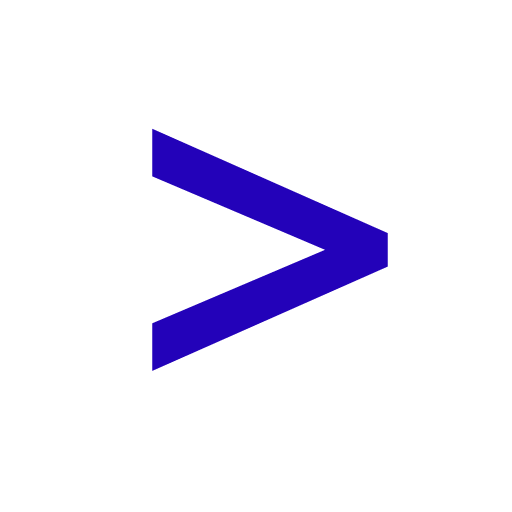
<style>
.page{position:relative;width:512px;height:512px;background:#ffffff}
.page>*{position:absolute;margin:0}
.t1{font:463px "HelveticaNeue-Medium";color:#2302b9}
</style>
<div class="page">
<p class="t1" style="left:152px;top:128px;width:236px;height:243px">&gt;</p>
</div>
